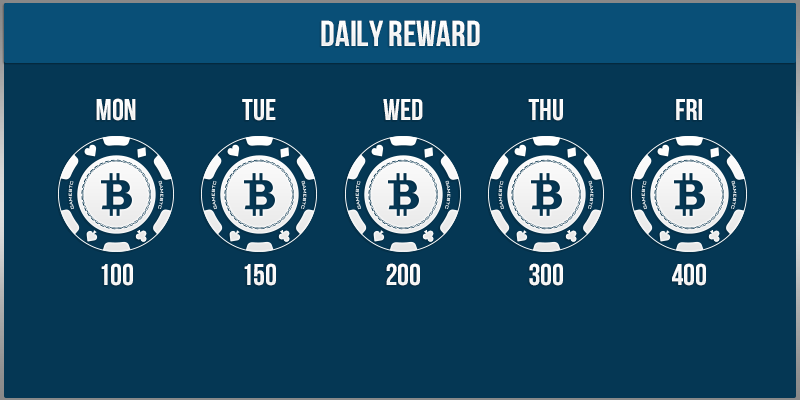
<style>
.page{position:relative;width:800px;height:400px;background:#053754}
.page>*{position:absolute;margin:0}
.t1{font:36px "UTM-Bebas";color:#ffffff}
.t2{font:30px "UTM-Bebas";color:#ffffff}
</style>
<div class="page">
<p class="t1" style="left:321px;top:20px;width:159px;height:26px">daily reward</p>
<p class="t2" style="left:96px;top:98px;width:40px;height:23px">Mon</p>
<p class="t2" style="left:242px;top:99px;width:34px;height:22px">tue</p>
<p class="t2" style="left:383px;top:99px;width:40px;height:21px">wed</p>
<p class="t2" style="left:528px;top:99px;width:35px;height:22px">thu</p>
<p class="t2" style="left:676px;top:99px;width:26px;height:21px">fri</p>
<p class="t2" style="left:101px;top:263px;width:32px;height:23px">100</p>
<p class="t2" style="left:244px;top:263px;width:32px;height:23px">150</p>
<p class="t2" style="left:386px;top:263px;width:34px;height:23px">200</p>
<p class="t2" style="left:529px;top:263px;width:34px;height:23px">300</p>
<p class="t2" style="left:672px;top:263px;width:34px;height:23px">400</p>
</div>
